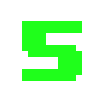
<style>
.page{position:relative;width:100px;height:100px;background:#ffffff}
.page>*{position:absolute;margin:0}
.t1{font:72px "8BITWONDERNominal";color:#1fff1b}
</style>
<div class="page">
<p class="t1" style="left:22px;top:21px;width:60px;height:60px">5</p>
</div>
